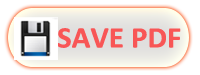
<style>
.page{position:relative;width:200px;height:75px;background:#ffffff}
.page>*{position:absolute;margin:0}
.t1{font:30px "Calibri-Bold";color:#f85656;scale:1.03 1}
</style>
<div class="page">
<p class="t1" style="left:57px;top:28px;width:124px;height:20px">SAVE PDF</p>
</div>
